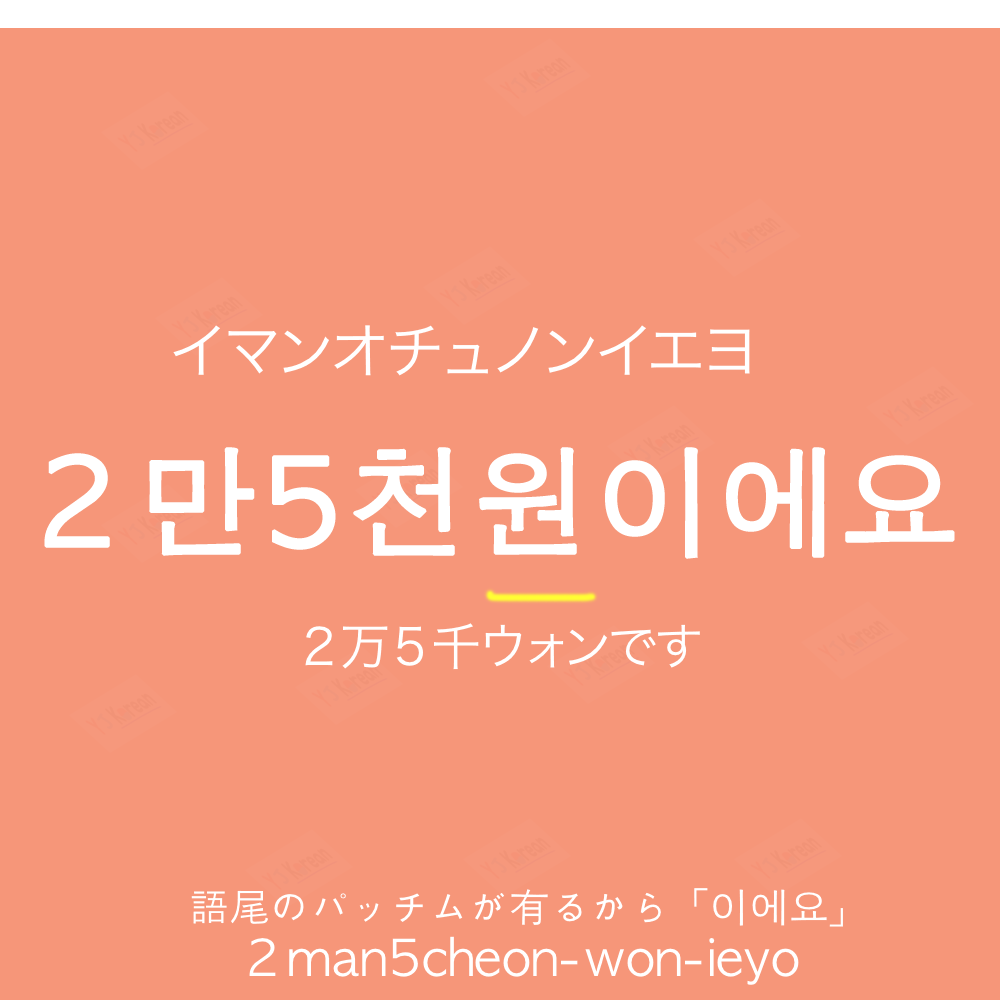
<style>
.page{position:relative;width:1000px;height:1000px;background:#f69679}
.page>*{position:absolute;margin:0}
.t1{font:60px "HiraKakuProN-W3";color:#ffffff;text-transform:uppercase}
.t2{font:120px "AppleGothic";color:#ffffff;font-weight:bold}
.t3{font:50px "HiraKakuProN-W3";color:#ffffff}
.t4{font:50px "AppleGothic";color:#ffffff}
</style>
<div class="page">
<p class="t1" style="left:173px;top:325px;width:577px;height:51px">イマンオチュノンイエヨ</p>
<p class="t2" style="left:44px;top:447px;width:911px;height:112px">２만5천원이에요</p>
<p class="t3" style="left:305px;top:623px;width:395px;height:47px">２万５千ウォンです</p>
<p class="t4" style="left:249px;top:936px;width:550px;height:49px">２man5cheon-won-ieyo</p>
</div>
